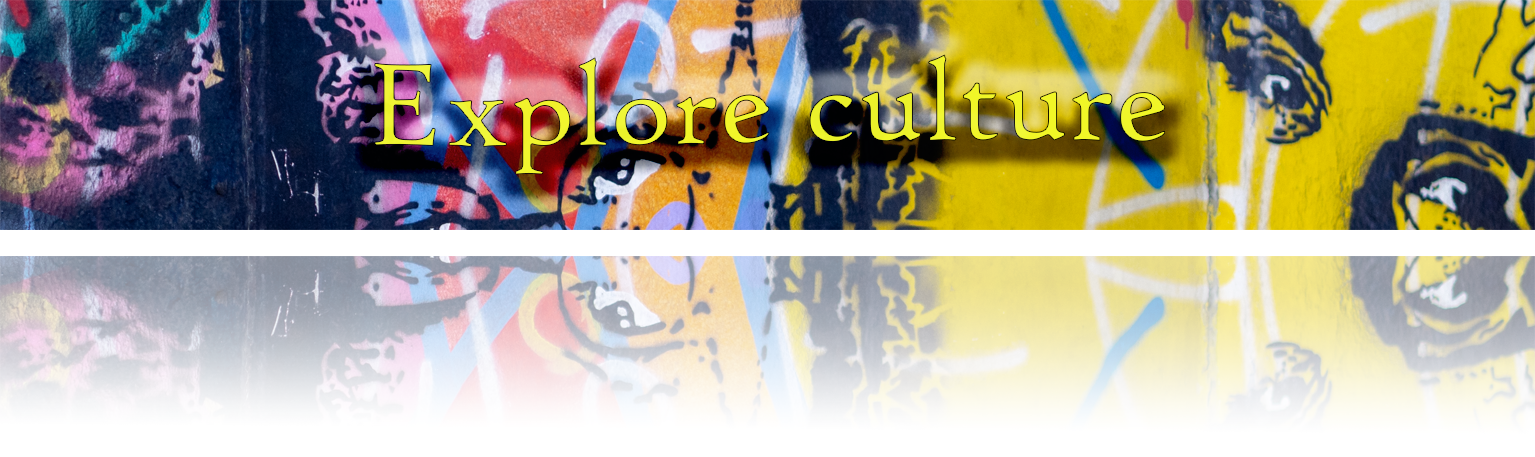
<style>
.page{position:relative;width:1535px;height:457px}
.page>*{position:absolute;margin:0}
.t1{font:125px "HighTowerText-Reg";color:#f2f929}
</style>
<div class="page">
<p class="t1" style="left:374px;top:54px;width:792px;height:121px;opacity:0.95">Explore culture</p>
</div>
